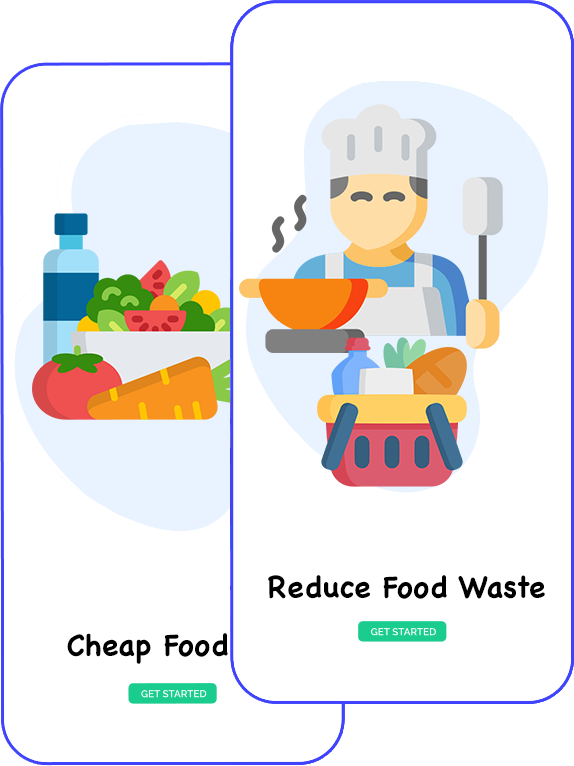
<style>
.page{position:relative;width:574px;height:766px;background:#ffffff}
.page>*{position:absolute;margin:0}
.t1{font:30px "ChalkboardSE-Bold";color:#000000}
</style>
<div class="page">
<p class="t1" style="left:268px;top:575px;width:277px;height:24px">Reduce Food Waste</p>
<p class="t1" style="left:67px;top:633px;width:161px;height:31px">Cheap Food</p>
</div>
